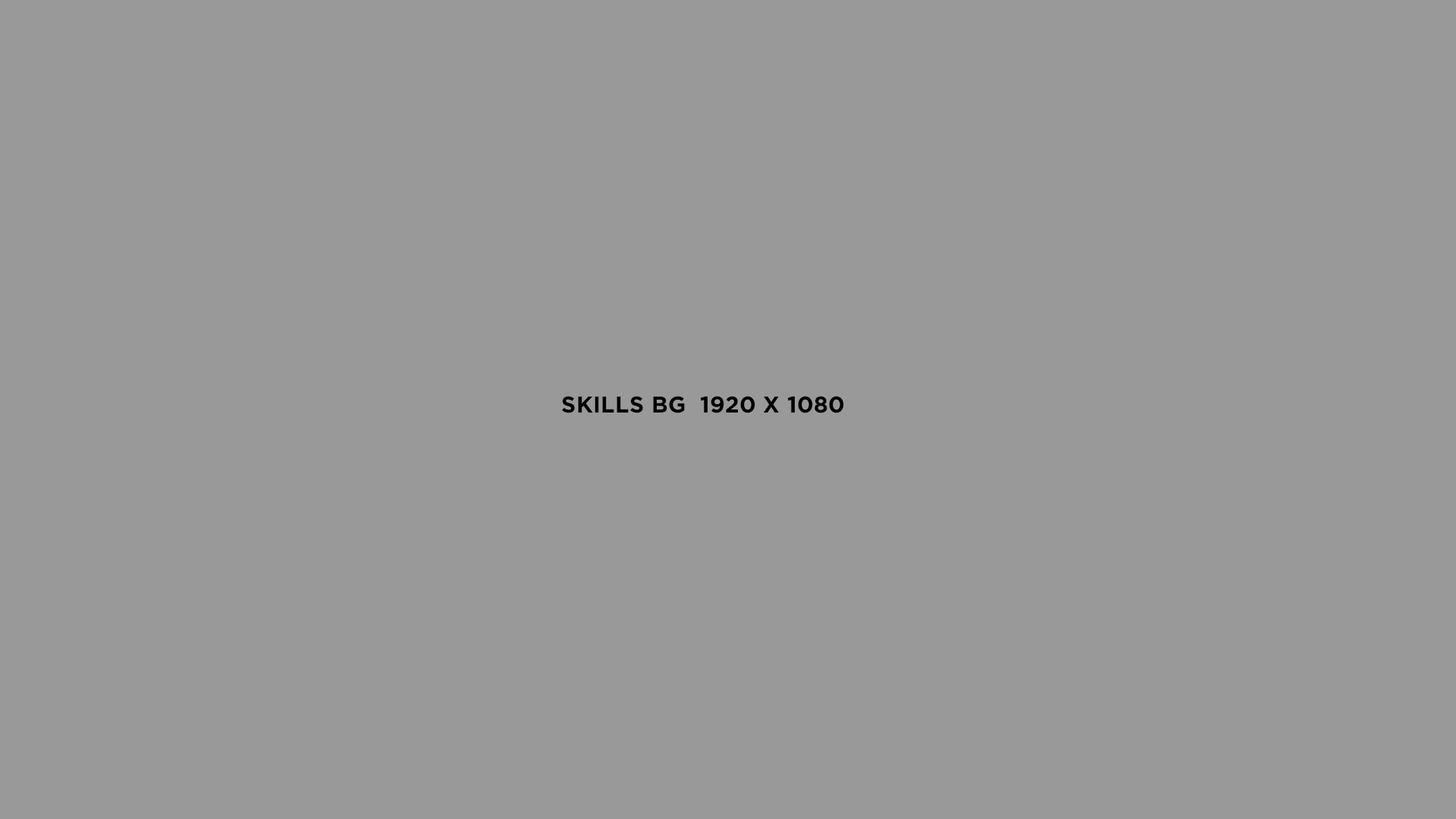
<style>
.page{position:relative;width:1456px;height:819px;background:#999999}
.page>*{position:absolute;margin:0}
.t1{font:22.7px "Gotham-Bold";letter-spacing:0.01em;color:#000000;text-transform:uppercase}
</style>
<div class="page">
<p class="t1" style="left:562px;top:396px;width:282px;height:17px">SKILLS BG  1920 x 1080</p>
</div>
